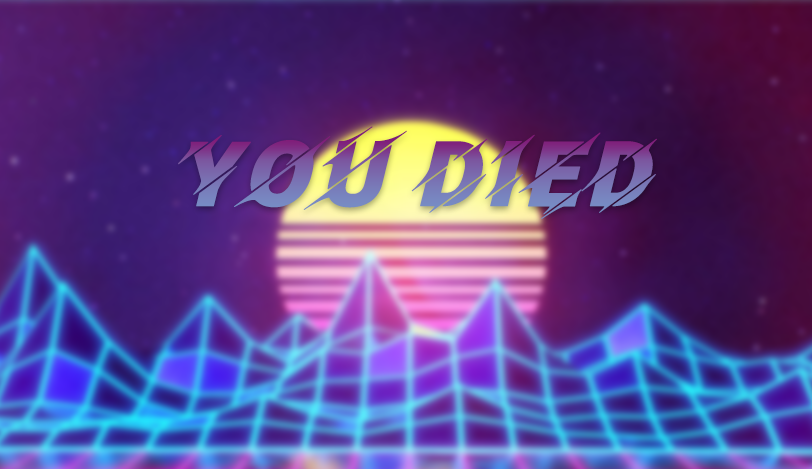
<style>
.page{position:relative;width:812px;height:469px}
.page>*{position:absolute;margin:0}
.t1{font:90px "Facon";font-weight:bold}
</style>
<div class="page">
<p class="t1" style="left:178px;top:126px;width:479px;height:93px">You Died</p>
</div>
